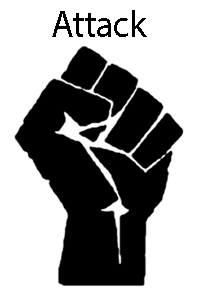
<style>
.page{position:relative;width:200px;height:290px;background:#ffffff}
.page>*{position:absolute;margin:0}
.t1{font:37.5px "MyriadPro-Regular";letter-spacing:-0.025em;color:#000000}
</style>
<div class="page">
<p class="t1" style="left:52px;top:10px;width:95px;height:27px">Attack</p>
</div>
